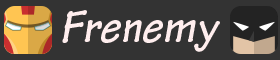
<style>
.page{position:relative;width:280px;height:60px;background:#333333}
.page>*{position:absolute;margin:0}
.t1{font:48px "TektonPro-BoldObl";letter-spacing:0.01em;color:#ffeeee}
</style>
<div class="page">
<p class="t1" style="left:62px;top:10px;width:158px;height:42px">Frenemy</p>
</div>
